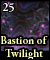
<style>
.page{position:relative;width:50px;height:60px;background:#000000}
.page>*{position:absolute;margin:0}
.t1{font:12px "AGaramondPro-Bold";color:#fefefe}
.t2{font:11px "AGaramondPro-Bold";color:#fdfcb0}
</style>
<div class="page">
<p class="t1" style="left:2px;top:3px;width:12px;height:9px">25</p>
<p class="t2" style="left:0px;top:36px;width:48px;height:24px">Bastion of<br>  Twilight</p>
</div>
